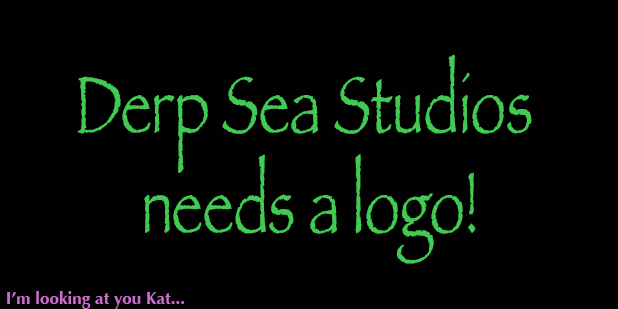
<style>
.page{position:relative;width:618px;height:309px;background:#010101}
.page>*{position:absolute;margin:0}
.t1{font:83.3px "Papyrus-Condensed";color:#42ca52}
.t2{font:17.1px "Optima-Bold";color:#ce6dd1}
</style>
<div class="page">
<p class="t1" style="left:77px;top:54px;width:455px;height:210px;text-align:center">Derp Sea Studios <br>needs a logo!</p>
<p class="t2" style="left:7px;top:291px;width:177px;height:18px">I’m looking at you Kat...</p>
</div>
